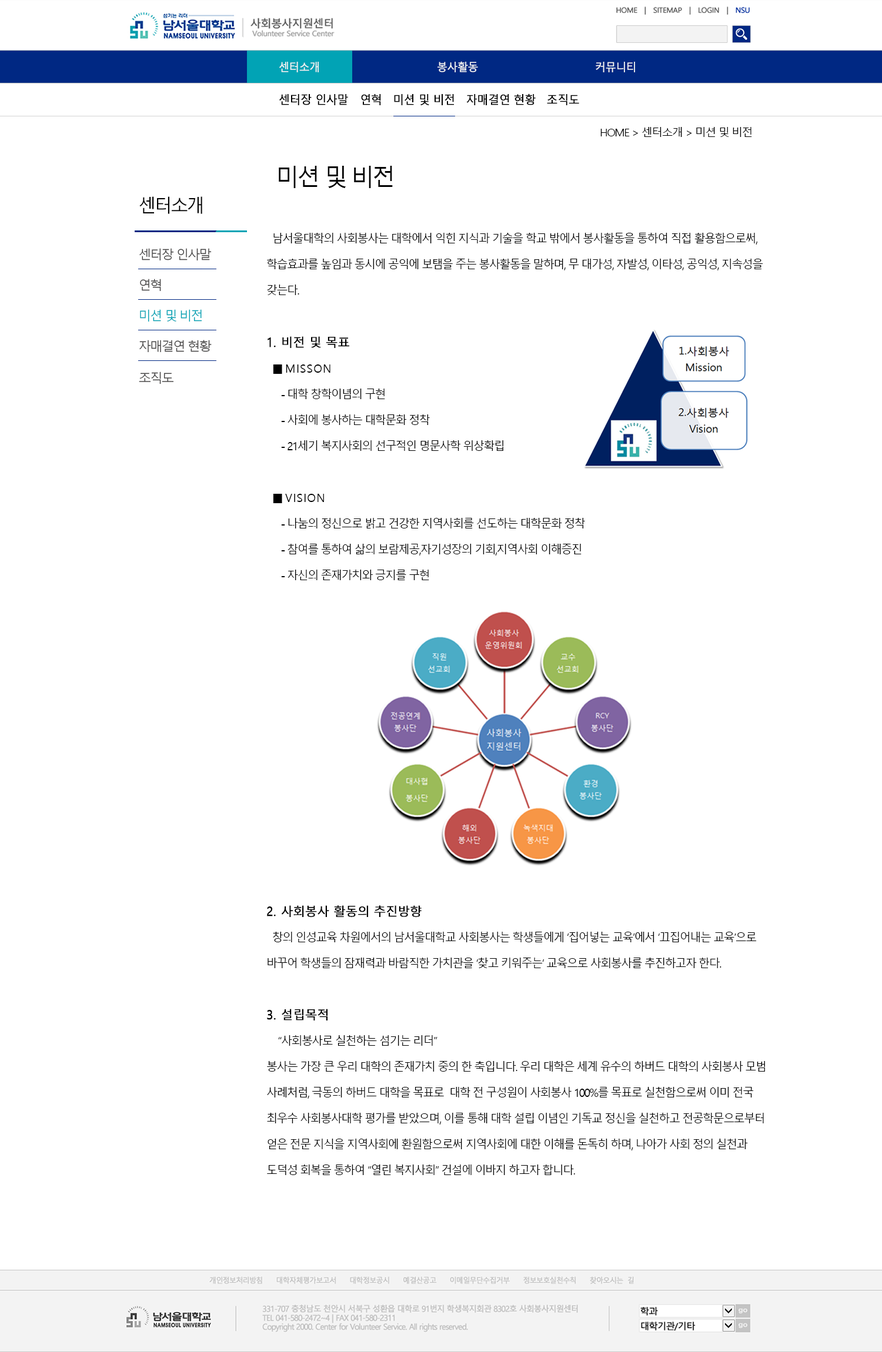
<style>
.page{position:relative;width:882px;height:1352px;background:#ffffff}
.page>*{position:absolute;margin:0}
.t1{font:11px "MalgunGothicRegular";letter-spacing:-0.05em;color:#f3f3f3;font-weight:bold;scale:0.95 1}
.t2{font:11.8px "MalgunGothicRegular";letter-spacing:-0.05em;color:#000000;font-weight:bold;scale:0.95 1}
.t3{font:10.8px "MalgunGothicRegular";letter-spacing:-0.1em;color:#000000;scale:1.05 1}
.t4{font:23.5px "MalgunGothicRegular";letter-spacing:-0.1em;color:#000000}
.t5{font:18.3px "MalgunGothicRegular";letter-spacing:-0.1em;color:#000000}
.t6{font:12px/25.9px "MalgunGothicRegular";letter-spacing:-0.1em;color:#000000;scale:0.95 1}
.t7{font:12.7px "MalgunGothicRegular";letter-spacing:-0.1em;color:#454444}
.t8{font:12.7px "MalgunGothicRegular";letter-spacing:-0.1em;color:#01a3b5}
.t9{font:12.7px/25.9px "MalgunGothicRegular";color:#000000;font-weight:bold;scale:0.95 1}
.t10{font:12px/25.9px "MalgunGothicRegular";letter-spacing:-0.025em;color:#000000;font-weight:bold}
.t11{font:12px/25.9px "MalgunGothicRegular";letter-spacing:0.05em;color:#000000;scale:0.95 1}
</style>
<div class="page">
<p class="t1" style="left:279px;top:61px;width:356px;height:11px">센터소개        봉사활동       커뮤니티</p>
<p class="t2" style="left:279px;top:93px;width:300px;height:12px">센터장 인사말  　연혁　미션 및 비전　자매결연 현황　조직도</p>
<p class="t3" style="left:600px;top:127px;width:152px;height:10px">HOME &gt; 센터소개 &gt; 미션 및 비전</p>
<p class="t4" style="left:279px;top:166px;width:114px;height:22px">미션 및 비전</p>
<p class="t5" style="left:139px;top:196px;width:63px;height:18px">센터소개</p>
<p class="t6" style="left:267px;top:233px;width:496px;height:62px">남서울대학의 사회봉사는 대학에서 익힌 지식과 기술을 학교 밖에서 봉사활동을 통하여 직접 활용함으로써, <br>학습효과를 높임과 동시에 공익에 보탬을 주는 봉사활동을 말하며, 무 대가성, 자발성, 이타성, 공익성, 지속성을 <br>갖는다.</p>
<p class="t7" style="left:139px;top:248px;width:73px;height:13px">센터장 인사말</p>
<p class="t7" style="left:140px;top:279px;width:21px;height:13px">연혁</p>
<p class="t8" style="left:140px;top:309px;width:62px;height:13px">미션 및 비전</p>
<p class="t7" style="left:139px;top:340px;width:73px;height:12px">자매결연 현황</p>
<p class="t6" style="left:267px;top:336px;width:498px;height:839px"><span class="t9">1. </span><span class="t10">비전 및 목표<br></span>  ■ <span class="t11">MISSON</span>    <br>     - 대학 창학이념의 구현<br>     - 사회에 봉사하는 대학문화 정착<br>     - 21세기 복지사회의 선구적인 명문사학 위상확립<br><br>  ■ <span class="t11">VISION</span> <br>     - 나눔의 정신으로 밝고 건강한 지역사회를 선도하는 대학문화 정착<br>     - 참여를 통하여 삶의 보람제공,자기성장의 기회,지역사회 이해증진<br>     - 자신의 존재가치와 긍지를 구현<br><br><br><span class="t9"><br><br><br><br><br><br><br><br><br><br>2. </span><span class="t10">사회봉사 활동의 추진방향<br></span>  창의 인성교육 차원에서의 남서울대학교 사회봉사는 학생들에게 ‘집어넣는 교육’에서 ‘끄집어내는 교육’으로 <br>바꾸어 학생들의 잠재력과 바람직한 가치관을 ‘찾고 키워주는’ 교육으로 사회봉사를 추진하고자 한다.<br><br><span class="t9">3. </span><span class="t10">설립목적<br></span>    “사회봉사로 실천하는 섬기는 리더”<br>봉사는 가장 큰 우리 대학의 존재가치 중의 한 축입니다. 우리 대학은 세계 유수의 하버드 대학의 사회봉사 모범 <br>사례처럼, 극동의 하버드 대학을 목표로  대학 전 구성원이 사회봉사 100%를 목표로 실천함으로써 이미 전국<br>최우수 사회봉사대학 평가를 받았으며, 이를 통해 대학 설립 이념인 기독교 정신을 실천하고 전공학문으로부터<br>얻은 전문 지식을 지역사회에 환원함으로써 지역사회에 대한 이해를 돈독히 하며, 나아가 사회 정의 실천과 <br>도덕성 회복을 통하여 “열린 복지사회” 건설에 이바지 하고자 합니다.</p>
<p class="t7" style="left:139px;top:372px;width:34px;height:12px">조직도</p>
</div>
